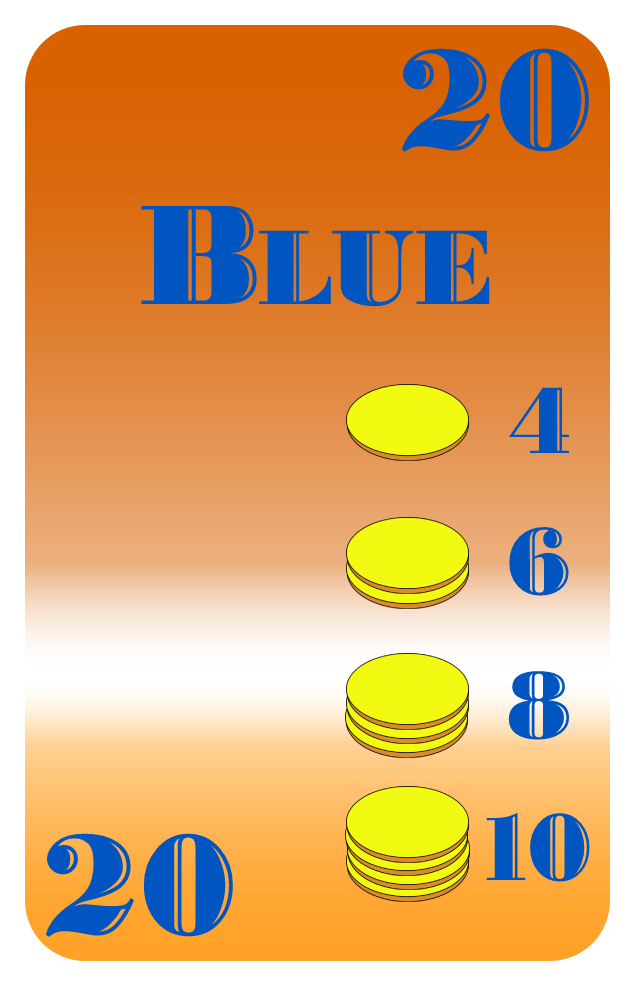
<style>
.page{position:relative;width:635px;height:986px}
.page>*{position:absolute;margin:0}
.t1{font:150px "BodoniHighlightICG";color:#0055c1}
.t2{font:112px "BodoniHighlightICG";color:#0055c1}
.t3{font:100px "BodoniHighlightICG";color:#0055c1}
</style>
<div class="page">
<p class="t1" style="left:401px;top:48px;width:188px;height:104px">20</p>
<p class="t2" style="left:141px;top:206px;width:349px;height:101px"><span class="t1">B</span>LUE</p>
<p class="t3" style="left:508px;top:387px;width:61px;height:66px">4</p>
<p class="t3" style="left:509px;top:527px;width:60px;height:69px">6</p>
<p class="t3" style="left:508px;top:671px;width:62px;height:69px">8</p>
<p class="t3" style="left:486px;top:812px;width:104px;height:70px">10</p>
<p class="t1" style="left:45px;top:833px;width:188px;height:104px">20</p>
</div>
